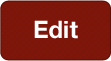
<style>
.page{position:relative;width:111px;height:61px;background:#80160a}
.page>*{position:absolute;margin:0}
.t1{font:24px "HelveticaNeue-Bold";color:#ffffff}
</style>
<div class="page">
<p class="t1" style="left:34px;top:20px;width:44px;height:19px">Edit</p>
</div>
